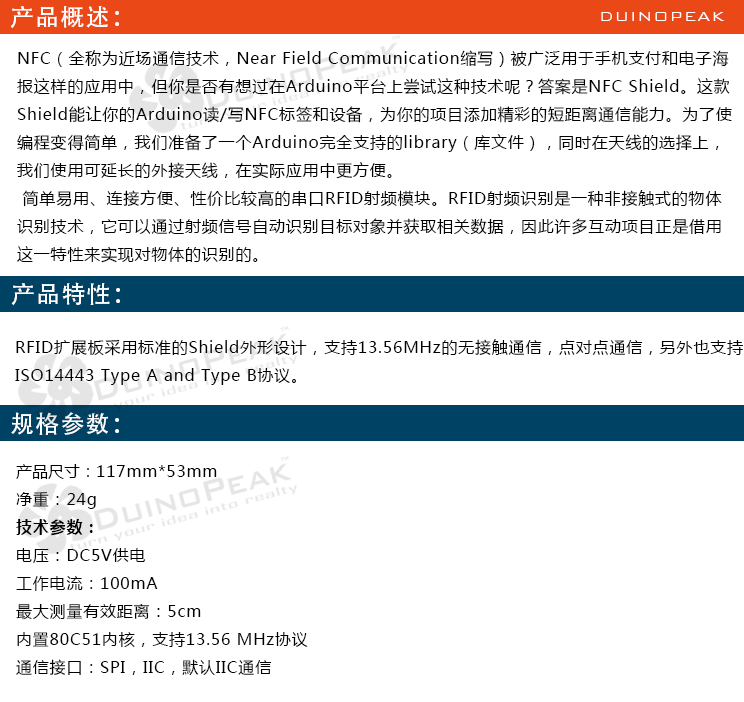
<style>
.page{position:relative;width:744px;height:702px;background:#ffffff}
.page>*{position:absolute;margin:0}
.t1{font:24px "AdobeHeitiStd-Regular";letter-spacing:0.05em;color:#ffffff}
.t2{font:18px "BankGothicBT-Light";letter-spacing:0.05em;color:#ffffff}
.t3{font:16px "MicrosoftYaHei";letter-spacing:0.05em;color:#000000}
.t4{font:16px "MicrosoftYaHei";color:#000000}
.t5{font:16px "MicrosoftYaHei-Bold";letter-spacing:0.05em;color:#000000}
</style>
<div class="page">
<p class="t1" style="left:10px;top:6px;width:109px;height:23px">产品概述：</p>
<p class="t2" style="left:601px;top:12px;width:124px;height:9px">DUINOPEAK</p>
<p class="t3" style="left:17px;top:50px;width:715px;height:213px">NFC（全称为近场通信技术，Near Field Communication缩写）被广泛用于手机支付和电子海<br>报这样的应用中，但你是否有想过在Arduino平台上尝试这种技术呢？答案是NFC Shield。这款<br>Shield能让你的Arduino读/写NFC标签和设备，为你的项目添加精彩的短距离通信能力。为了使<br>编程变得简单，我们准备了一个Arduino完全支持的library（库文件），同时在天线的选择上，<br>我们使用可延长的外接天线，在实际应用中更方便。<br> 简单易用、连接方便、性价比较高的串口RFID射频模块。RFID射频识别是一种非接触式的物体<br>识别技术，它可以通过射频信号自动识别目标对象并获取相关数据，因此许多互动项目正是借用<br>这一特性来实现对物体的识别的。</p>
<p class="t1" style="left:11px;top:282px;width:109px;height:24px">产品特性：</p>
<p class="t3" style="left:15px;top:339px;width:728px;height:46px">RFID扩展板采用标准的Shield外形设计，支持13.56MHz的无接触通信，点对点通信，另外也支持<br>ISO14443 Type A and Type B协议。</p>
<p class="t1" style="left:11px;top:412px;width:108px;height:23px">规格参数：</p>
<p class="t3" style="left:16px;top:464px;width:292px;height:212px"><span class="t4">产品尺寸：</span>117mm*53mm<br>净重：24g<br><span class="t5">技术参数：<br></span>电压：DC5V供电<br>工作电流：100mA<br>最大测量有效距离：5cm<br>内置80C51内核，支持13.56 MHz协议<br>通信接口：SPI，IIC，默认IIC通信</p>
</div>
